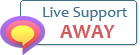
<style>
.page{position:relative;width:140px;height:55px;background:#ffffff}
.page>*{position:absolute;margin:0}
.t1{font:16px "Candara";color:#40738b}
.t2{font:20px "Candara-Bold";color:#cf5d60}
</style>
<div class="page">
<p class="t1" style="left:43px;top:7px;width:85px;height:14px">Live Support</p>
<p class="t2" style="left:60px;top:25px;width:55px;height:13px">AWAY</p>
</div>
